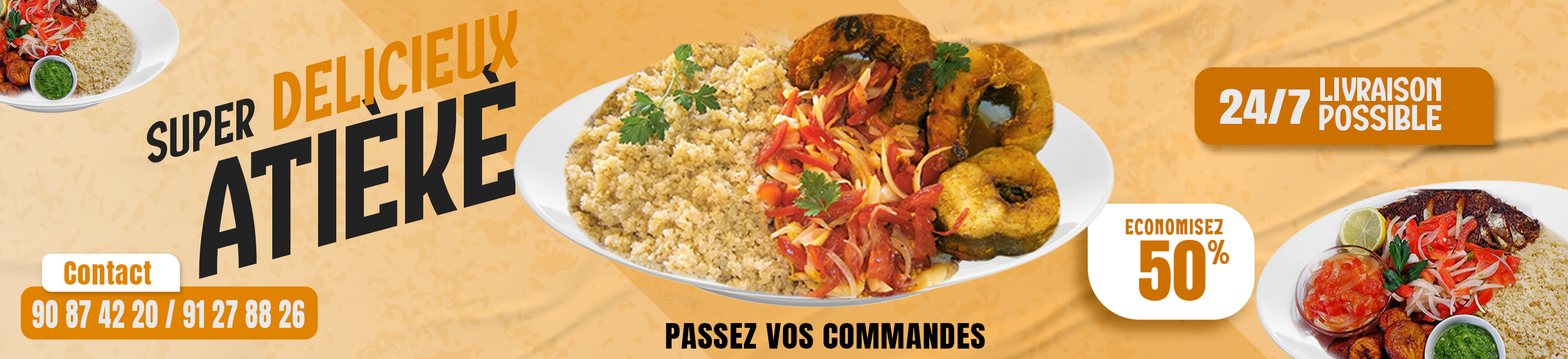
<style>
.page{position:relative;width:1568px;height:359px}
.page>*{position:absolute;margin:0}
.t1{font:80.1px "Bandikotrial-Regular";letter-spacing:0.015em;color:#df8300;text-transform:uppercase;scale:1.03 1}
.t2{font:161.2px "Bandikotrial-Regular";color:#222222;text-transform:uppercase;scale:1.03 1}
.t3{font:33.5px "Bandikotrial-Regular";color:#e9e9ea;text-transform:uppercase;scale:1.22 1}
.t4{font:40px "Anton-Regular";color:#e9e9ea;text-transform:uppercase;scale:1.22 1}
.t5{font:56.5px "Bandikotrial-Regular";letter-spacing:0.015em;color:#222222;text-transform:uppercase;scale:1.03 1}
.t6{font:36px "Bandikotrial-Regular";color:#e9e9ea;text-transform:uppercase;scale:1.22 1}
.t7{font:21.8px "Bandikotrial-Regular";letter-spacing:0.05em;color:#cc7000;text-transform:uppercase;font-weight:bold}
.t8{font:69.6px "Anton-Regular";color:#cc7000;text-transform:uppercase}
.t9{font:34.8px "Bandikotrial-Regular";color:#cc7000;text-transform:uppercase}
.t10{font:27.5px "Anton-Regular";letter-spacing:0.025em;color:#df8300}
.t11{font:32.5px "Anton-Regular";letter-spacing:0.025em;color:#e9e9ea;text-transform:uppercase;scale:0.79 1}
.t12{font:29.7px "Anton-Regular";letter-spacing:0.015em;color:#000000;text-transform:uppercase;scale:1.1 1}
</style>
<div class="page">
<p class="t1" style="left:274px;top:9px;width:245px;height:122px;rotate:-15deg">delicieux</p>
<p class="t2" style="left:199px;top:62px;width:317px;height:218px;rotate:-15deg">atièkè</p>
<p class="t3" style="left:1320px;top:77px;width:121px;height:25px">Livraison</p>
<p class="t4" style="left:1220px;top:89px;width:90px;height:35px">24/7</p>
<p class="t5" style="left:147px;top:98px;width:108px;height:65px;rotate:-15deg">Super</p>
<p class="t6" style="left:1319px;top:105px;width:122px;height:26px">possible</p>
<p class="t7" style="left:1126px;top:219px;width:97px;height:16px">economisez</p>
<p class="t8" style="left:1139px;top:240px;width:67px;height:61px">50</p>
<p class="t9" style="left:1208px;top:240px;width:21px;height:24px">%</p>
<p class="t10" style="left:64px;top:261px;width:87px;height:24px">Contact</p>
<p class="t11" style="left:32px;top:300px;width:273px;height:28px">90 87 42 20 / 91 27 88 26</p>
<p class="t12" style="left:666px;top:323px;width:319px;height:26px">PASSEz VOS COMMANDEs</p>
</div>
